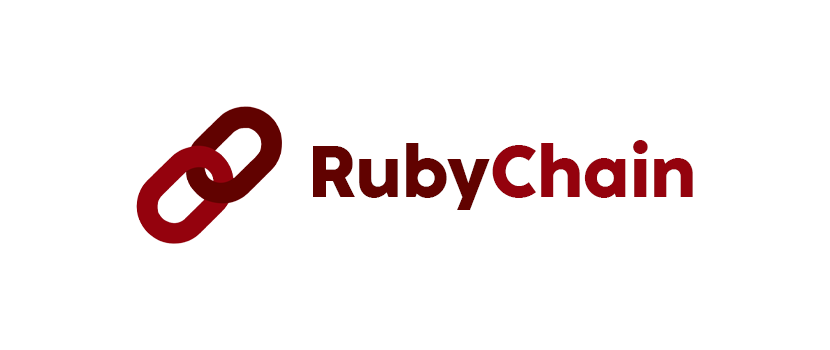
<style>
.page{position:relative;width:830px;height:350px;background:#ffffff}
.page>*{position:absolute;margin:0}
.t1{font:72px "CocoSharpTrial-Extrabold";color:#94020d}
.t2{font:72px "CocoSharpTrial-Extrabold";color:#610200}
</style>
<div class="page">
<p class="t1" style="left:313px;top:140px;width:380px;height:70px"><span class="t2">Ruby</span>Chain</p>
</div>
